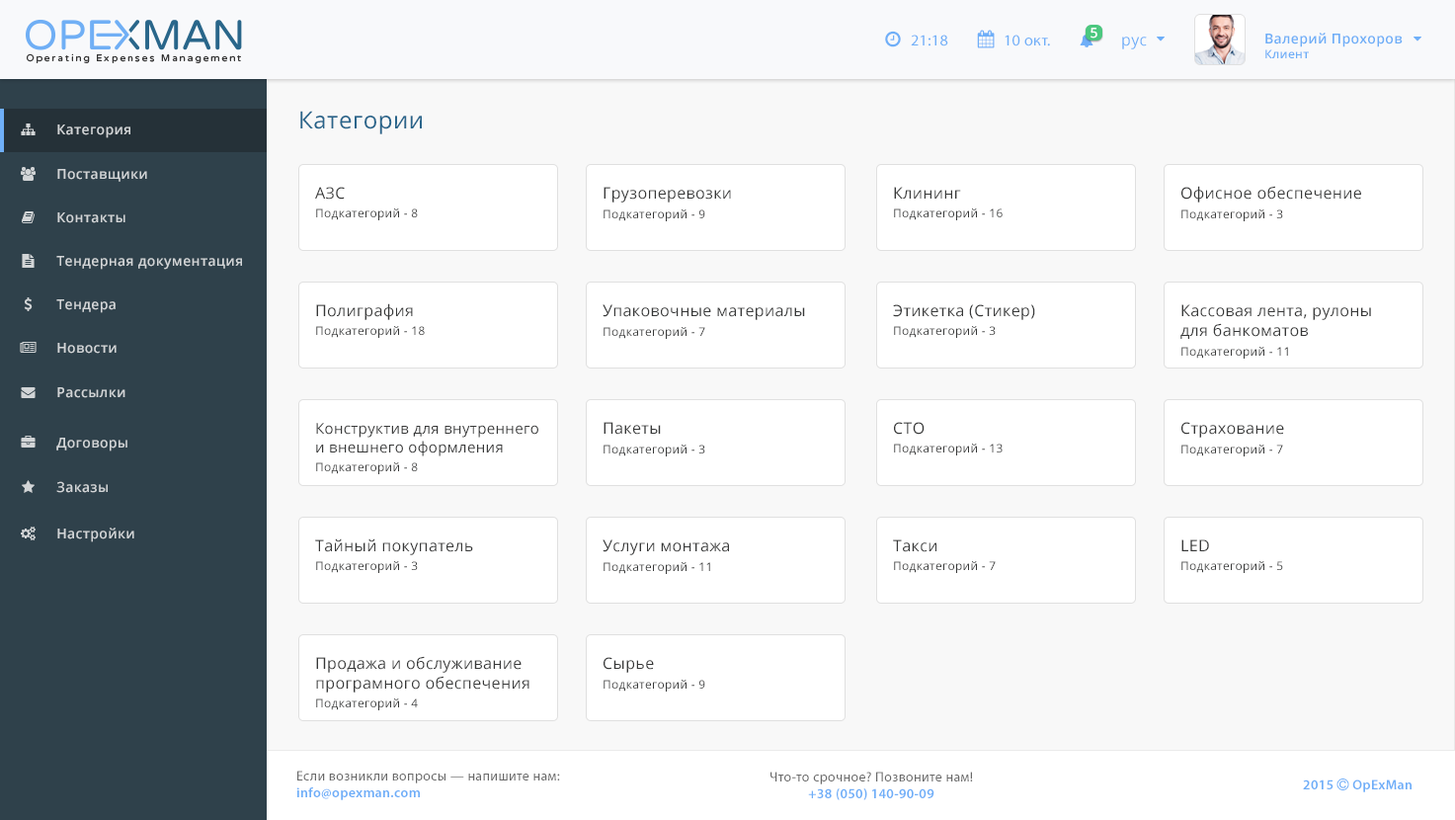
<style>
.page{position:relative;width:1455px;height:820px;background:#ffffff}
.page>*{position:absolute;margin:0}
.t1{font:13.8px "OpenSans-Semibold";letter-spacing:0.025em;color:#ffffff}
.t2{font:15.7px "MyriadPro-Regular";letter-spacing:0.025em;color:#6faff8}
.t3{font:15.7px "OpenSans";letter-spacing:0.025em;color:#6eaff8}
.t4{font:13.8px "OpenSans-Semibold";letter-spacing:0.025em;color:#6eaef7}
.t5{font:11.8px "OpenSans-Semibold";letter-spacing:0.025em;color:#6eaef7}
.t6{font:23.6px "OpenSans";letter-spacing:0.025em;color:#29658b}
.t7{font:13.8px "OpenSans-Semibold";letter-spacing:0.025em;color:#d2d5d7}
.t8{font:15.7px "OpenSans";letter-spacing:0.025em;color:#373838}
.t9{font:11.8px "OpenSans";letter-spacing:0.025em;color:#373838}
.t10{font:14.8px "OpenSans";letter-spacing:0.025em;color:#373838}
.t11{font:13.8px "MyriadPro-Regular";letter-spacing:0.025em;color:#696969}
.t12{font:13.8px "MyriadPro-Semibold";letter-spacing:0.025em;color:#6eaef8}
</style>
<div class="page">
<p class="t1" style="left:1090px;top:28px;width:7px;height:11px">5</p>
<p class="t2" style="left:911px;top:35px;width:37px;height:11px">21:18</p>
<p class="t2" style="left:1004px;top:35px;width:46px;height:11px">10 окт.</p>
<p class="t3" style="left:1122px;top:37px;width:25px;height:12px">рус</p>
<p class="t4" style="left:1265px;top:33px;width:137px;height:25px">Валерий Прохоров<br><span class="t5">Клиент</span></p>
<p class="t6" style="left:300px;top:111px;width:122px;height:23px">Категории</p>
<p class="t7" style="left:57px;top:124px;width:73px;height:14px">Категория</p>
<p class="t7" style="left:57px;top:169px;width:90px;height:13px">Поставщики</p>
<p class="t8" style="left:1181px;top:186px;width:180px;height:16px">Офисное обеспечение</p>
<p class="t8" style="left:315px;top:187px;width:30px;height:12px">АЗС</p>
<p class="t8" style="left:603px;top:187px;width:128px;height:15px">Грузоперевозки</p>
<p class="t8" style="left:894px;top:187px;width:67px;height:12px">Клининг</p>
<p class="t9" style="left:316px;top:208px;width:102px;height:12px">Подкатегорий - 8</p>
<p class="t9" style="left:603px;top:209px;width:102px;height:12px">Подкатегорий - 9</p>
<p class="t9" style="left:894px;top:208px;width:108px;height:12px">Подкатегорий - 16</p>
<p class="t9" style="left:1181px;top:209px;width:102px;height:12px">Подкатегорий - 3</p>
<p class="t7" style="left:57px;top:212px;width:68px;height:11px">Контакты</p>
<p class="t7" style="left:56px;top:256px;width:186px;height:14px">Тендерная документация</p>
<p class="t7" style="left:56px;top:299px;width:60px;height:14px">Тендера</p>
<p class="t8" style="left:316px;top:303px;width:97px;height:17px">Полиграфия</p>
<p class="t8" style="left:602px;top:304px;width:203px;height:16px">Упаковочные материалы</p>
<p class="t8" style="left:893px;top:304px;width:142px;height:16px">Этикетка (Стикер)</p>
<p class="t8" style="left:1180px;top:304px;width:191px;height:35px">Кассовая лента, рулоны <br>для банкоматов</p>
<p class="t9" style="left:316px;top:326px;width:109px;height:12px">Подкатегорий - 18</p>
<p class="t9" style="left:603px;top:327px;width:102px;height:12px">Подкатегорий - 7</p>
<p class="t9" style="left:894px;top:326px;width:101px;height:12px">Подкатегорий - 3</p>
<p class="t7" style="left:57px;top:343px;width:60px;height:11px">Новости</p>
<p class="t9" style="left:1181px;top:347px;width:107px;height:11px">Подкатегорий - 11</p>
<p class="t7" style="left:57px;top:387px;width:68px;height:11px">Рассылки</p>
<p class="t10" style="left:316px;top:423px;width:222px;height:33px">Конструктив для внутреннего <br>и внешнего оформления</p>
<p class="t8" style="left:603px;top:422px;width:58px;height:13px">Пакеты</p>
<p class="t8" style="left:894px;top:422px;width:30px;height:13px">СТО</p>
<p class="t8" style="left:1181px;top:422px;width:103px;height:16px">Страхование</p>
<p class="t7" style="left:56px;top:438px;width:71px;height:13px">Договоры</p>
<p class="t9" style="left:603px;top:444px;width:102px;height:12px">Подкатегорий - 3</p>
<p class="t9" style="left:894px;top:443px;width:108px;height:12px">Подкатегорий - 13</p>
<p class="t9" style="left:1181px;top:444px;width:102px;height:12px">Подкатегорий - 7</p>
<p class="t9" style="left:316px;top:462px;width:102px;height:12px">Подкатегорий - 8</p>
<p class="t7" style="left:56px;top:481px;width:52px;height:12px">Заказы</p>
<p class="t7" style="left:57px;top:527px;width:77px;height:15px">Настройки</p>
<p class="t8" style="left:315px;top:538px;width:158px;height:17px">Тайный покупатель</p>
<p class="t8" style="left:602px;top:539px;width:127px;height:16px">Услуги монтажа</p>
<p class="t8" style="left:893px;top:539px;width:43px;height:13px">Такси</p>
<p class="t8" style="left:1181px;top:539px;width:28px;height:12px">LED</p>
<p class="t9" style="left:316px;top:561px;width:102px;height:12px">Подкатегорий - 3</p>
<p class="t9" style="left:603px;top:562px;width:107px;height:12px">Подкатегорий - 11</p>
<p class="t9" style="left:894px;top:561px;width:101px;height:12px">Подкатегорий - 7</p>
<p class="t9" style="left:1181px;top:561px;width:102px;height:12px">Подкатегорий - 5</p>
<p class="t8" style="left:316px;top:656px;width:213px;height:36px">Продажа и обслуживание <br>програмного обеспечения</p>
<p class="t8" style="left:603px;top:657px;width:51px;height:16px">Сырье</p>
<p class="t9" style="left:603px;top:679px;width:102px;height:12px">Подкатегорий - 9</p>
<p class="t9" style="left:316px;top:698px;width:102px;height:12px">Подкатегорий - 4</p>
<p class="t11" style="left:296px;top:770px;width:264px;height:30px">Если возникли вопросы — напишите нам:<br><span class="t12">info@opexman.com</span></p>
<p class="t11" style="left:770px;top:771px;width:203px;height:29px;text-align:center">Что-то срочное? Позвоните нам!<br><span class="t12">+38 (050) 140-90-09</span></p>
</div>
